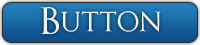
<style>
.page{position:relative;width:200px;height:45px}
.page>*{position:absolute;margin:0}
.t1{font:36px "OptimusPrinceps";color:#f0f0f0}
</style>
<div class="page">
<p class="t1" style="left:40px;top:7px;width:121px;height:27px">Button</p>
</div>
